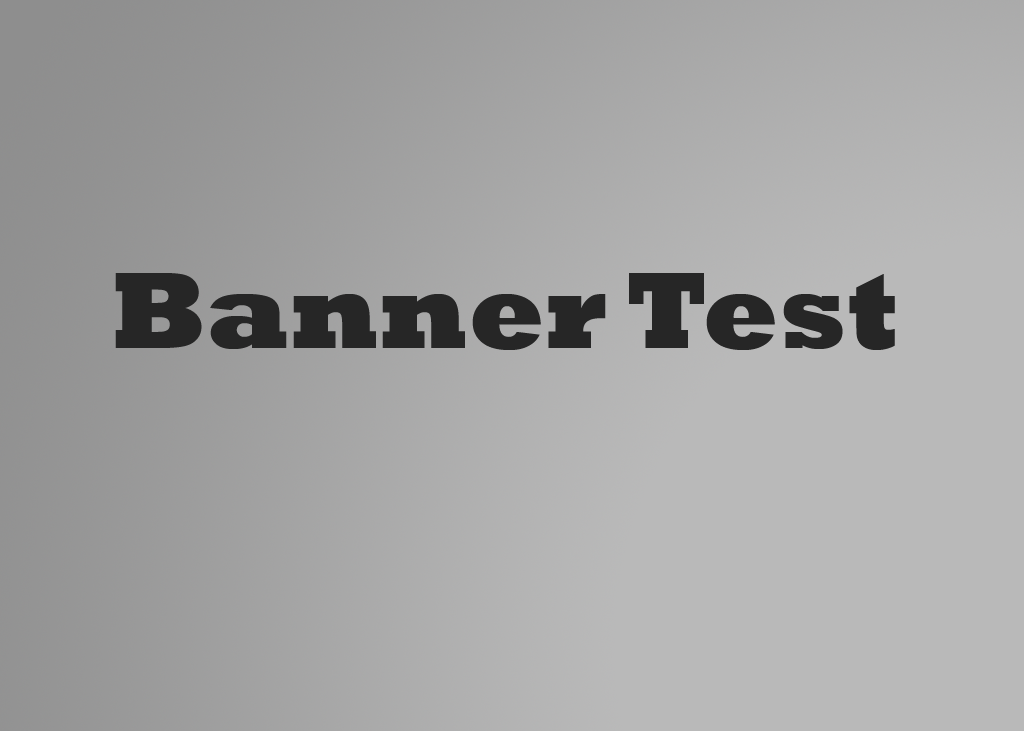
<style>
.page{position:relative;width:1024px;height:731px;background:#b9b9b9}
.page>*{position:absolute;margin:0}
.t1{font:111.1px "Rockwell-ExtraBold";color:#262626}
</style>
<div class="page">
<p class="t1" style="left:115px;top:273px;width:780px;height:77px">Banner Test</p>
</div>
